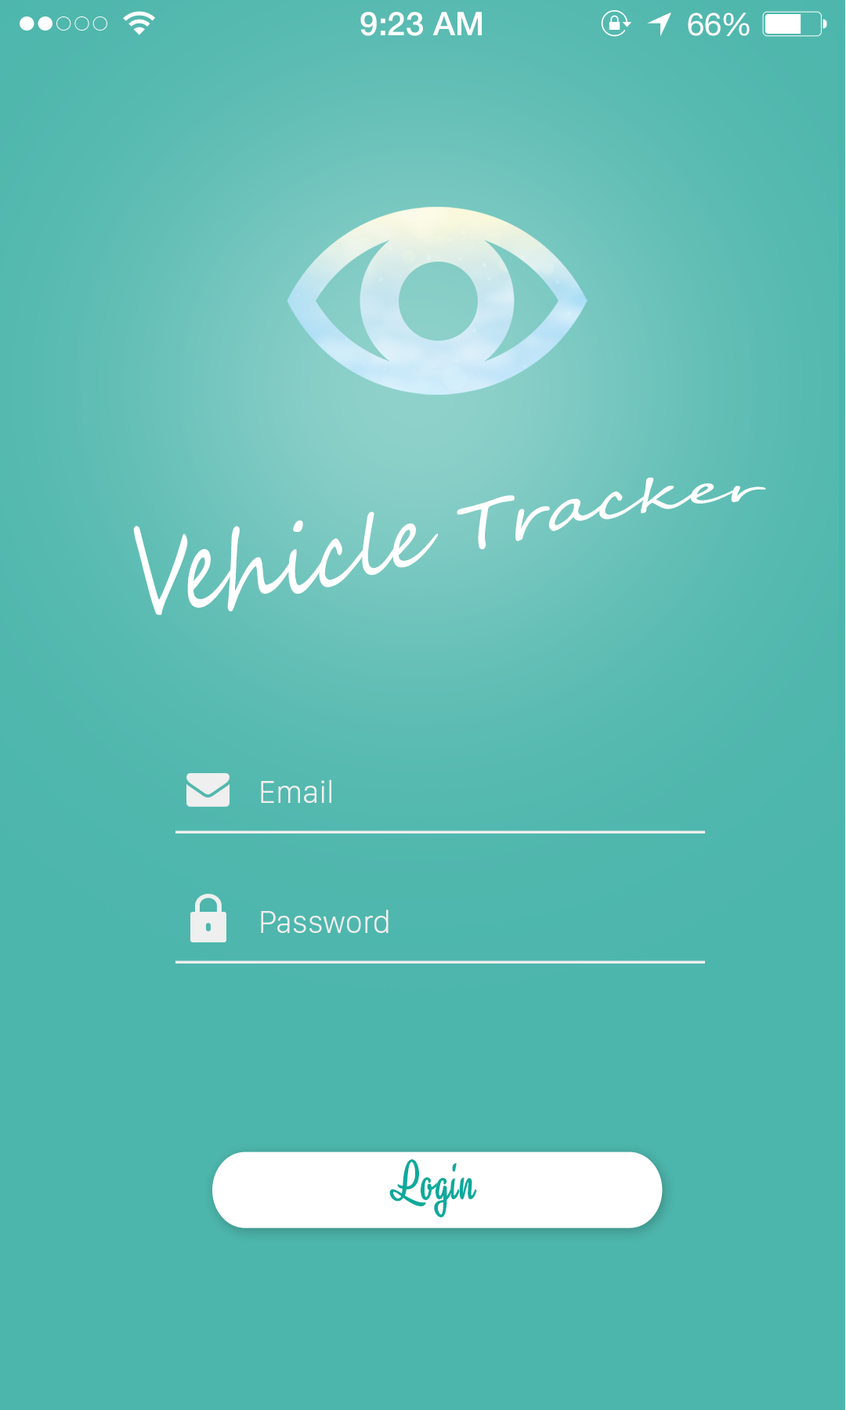
<style>
.page{position:relative;width:846px;height:1410px;background:#4db6ac}
.page>*{position:absolute;margin:0}
.t1{font:32.7px "HelveticaNeue-Medium";color:#ffffff}
.t2{font:31.3px "HelveticaNeue";color:#ffffff}
.t3{font:31.3px "HelveticaNeue";letter-spacing:-0.02em;color:#ffffff}
.t4{font:74.4px/4.8px "SegoeScript";color:#ffffff}
.t5{font:32.6px "SanFranciscoDisplay-Light";color:#ffffff}
.t6{font:50px "iCielAlina";letter-spacing:0.02em;color:#0caa9c}
</style>
<div class="page">
<p class="t1" style="left:360px;top:12px;width:122px;height:24px">9:23 AM</p>
<p class="t2" style="left:688px;top:13px;width:62px;height:23px">6<span class="t3">6</span>%</p>
<p class="t4" style="left:133px;top:477px;width:633px;height:138px">Vehicle Tracker</p>
<p class="t5" style="left:261px;top:779px;width:70px;height:24px">Email</p>
<p class="t5" style="left:261px;top:909px;width:127px;height:24px">Password</p>
<p class="t6" style="left:389px;top:1159px;width:88px;height:58px">Login</p>
</div>
